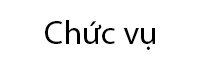
<style>
.page{position:relative;width:200px;height:70px;background:#ffffff}
.page>*{position:absolute;margin:0}
.t1{font:32.9px "MyriadPro-Regular";color:#000000}
</style>
<div class="page">
<p class="t1" style="left:45px;top:20px;width:110px;height:30px">Chức vụ</p>
</div>
